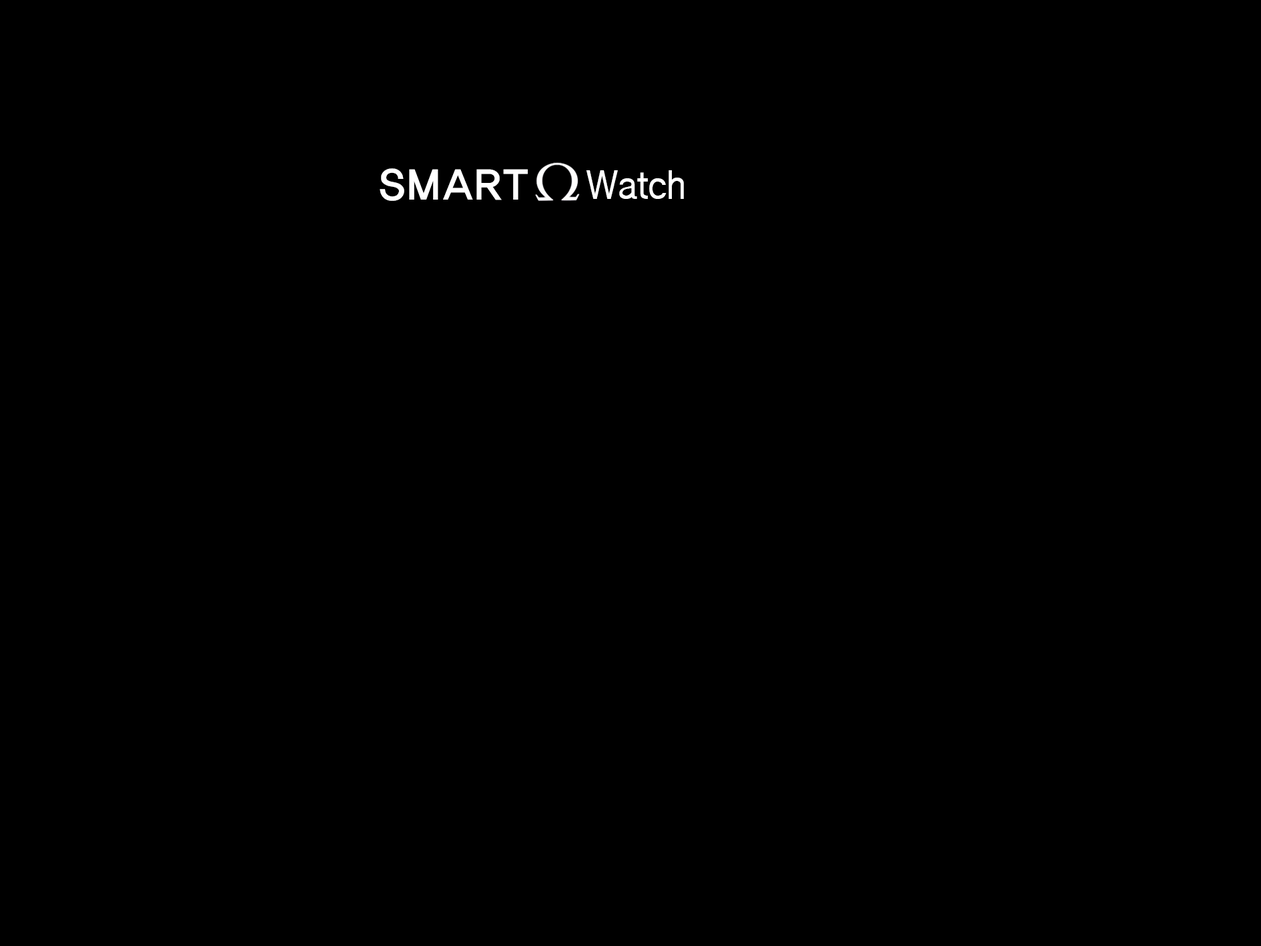
<style>
.page{position:relative;width:1261px;height:946px;background:#000000}
.page>*{position:absolute;margin:0}
.t1{font:43.3px "HaanYGodic24";letter-spacing:-0.02em;color:#ffffff}
.t2{font:38.9px "ÈÞ¸Õ°íµñ";letter-spacing:-0.02em;color:#ffffff}
</style>
<div class="page">
<p class="t1" style="left:380px;top:168px;width:304px;height:33px">SMART    <span class="t2">Watch</span></p>
</div>
